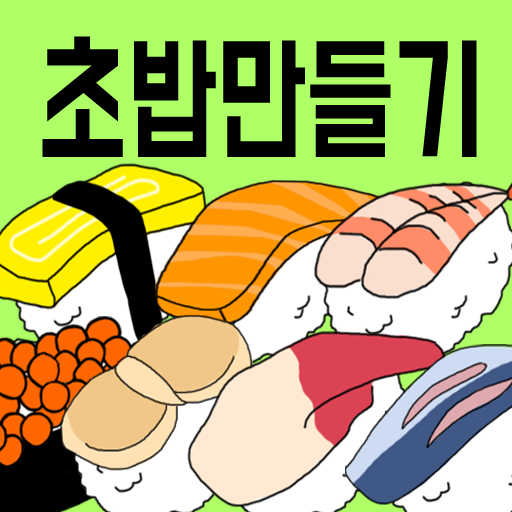
<style>
.page{position:relative;width:512px;height:512px;background:#afff67}
.page>*{position:absolute;margin:0}
.t1{font:122.9px "BMDoHyeon";color:#000000;scale:0.76 1}
</style>
<div class="page">
<p class="t1" style="left:42px;top:36px;width:435px;height:121px">초밥만들기</p>
</div>
